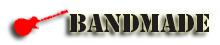
<style>
.page{position:relative;width:220px;height:45px;background:#ffffff}
.page>*{position:absolute;margin:0}
.t1{font:24px "StencilStd";color:#1f1d1d}
</style>
<div class="page">
<p class="t1" style="left:69px;top:14px;width:140px;height:18px">BandMade</p>
</div>
